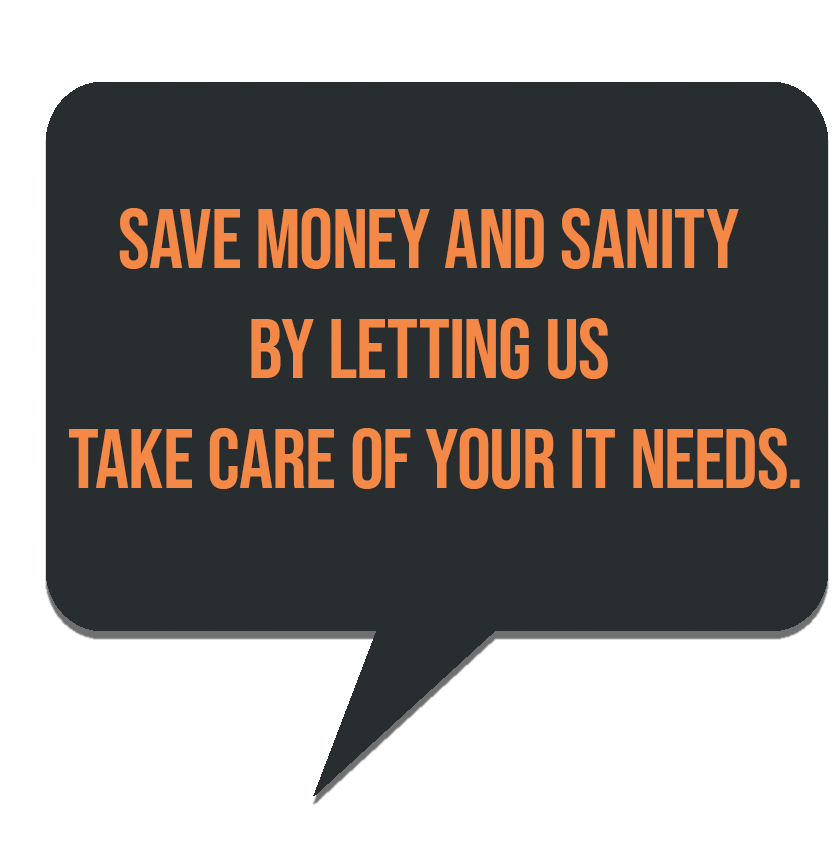
<style>
.page{position:relative;width:840px;height:859px;background:#ffffff}
.page>*{position:absolute;margin:0}
.t1{font:85px/110px "BebasNeue-Regular";color:#f48847}
</style>
<div class="page">
<p class="t1" style="left:69px;top:208px;width:731px;height:281px;text-align:center">save money and sanity <br>by letting us <br>take care of your it needs.</p>
</div>
